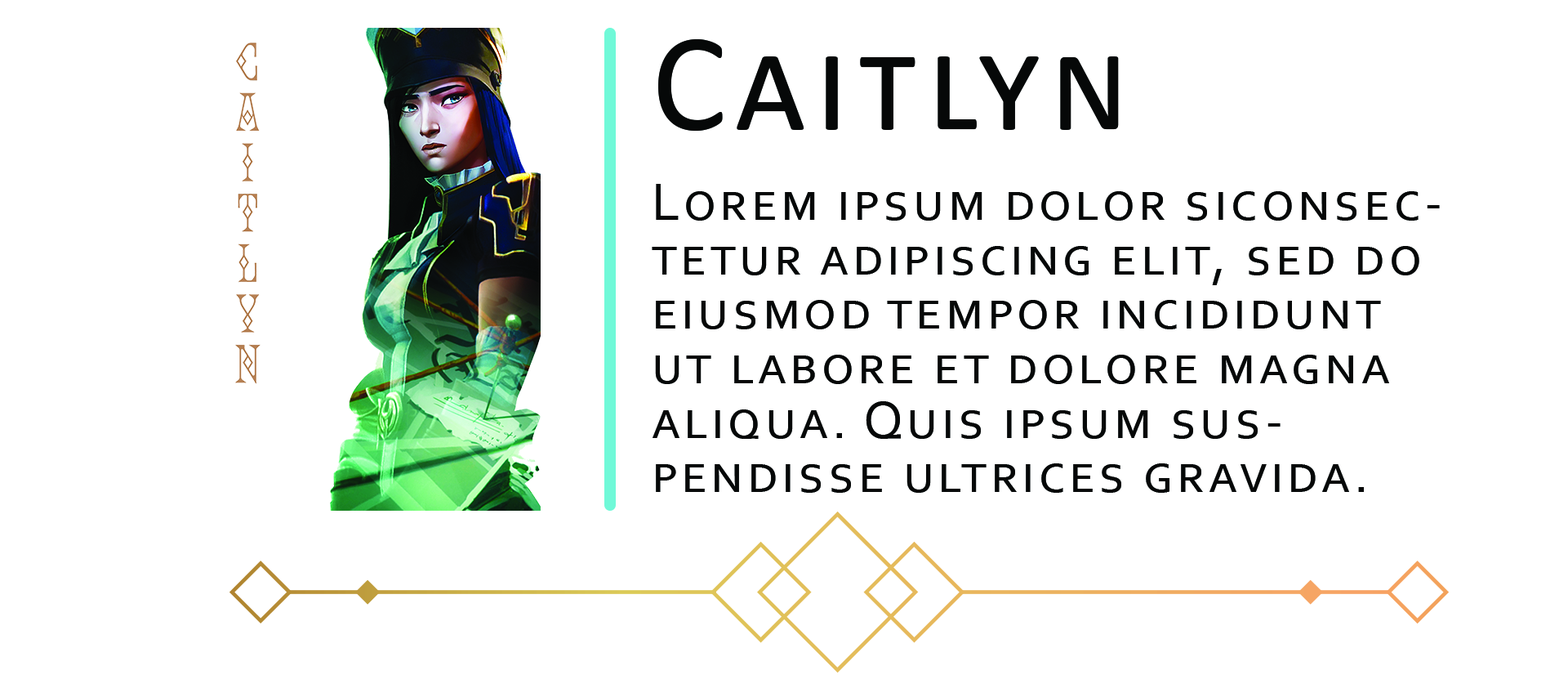
<style>
.page{position:relative;width:1568px;height:693px;background:#ffffff}
.page>*{position:absolute;margin:0}
.t1{font:140px "Calibri";letter-spacing:0.07em;color:#060808;font-variant:small-caps}
.t2{font:54.4px/54.4px "Corbel";letter-spacing:0.07em;color:#060808;font-variant:small-caps}
</style>
<div class="page">
<p class="t1" style="left:658px;top:39px;width:461px;height:92px">Caitlyn</p>
<p class="t2" style="left:652px;top:184px;width:788px;height:308px">Lorem ipsum dolor siconsectetur adipiscing elit, sed do eiusmod tempor incididunt ut labore et dolore magna aliqua. Quis ipsum suspendisse ultrices gravida. Risus commodo viverra maecenas accumsan lacus vel facilisis.</p>
</div>
